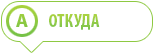
<style>
.page{position:relative;width:154px;height:54px;background:#ffffff}
.page>*{position:absolute;margin:0}
.t1{font:19px "MyriadPro-BoldCond";color:#99cd45}
</style>
<div class="page">
<p class="t1" style="left:49px;top:14px;width:51px;height:16px">ОТКУДА</p>
</div>
